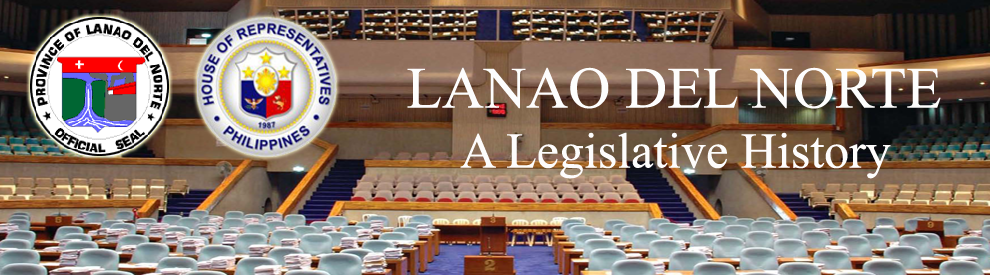
<style>
.page{position:relative;width:990px;height:275px}
.page>*{position:absolute;margin:0}
.t1{font:50px "TimesNewRomanPSMT";color:#fdfcfc}
.t2{font:58.3px "TimesNewRomanPSMT";color:#fdfdfd}
</style>
<div class="page">
<p class="t1" style="left:407px;top:67px;width:534px;height:112px;text-align:center"><span class="t2">LANAO DEL NORTE<br></span>A Legislative History</p>
</div>
